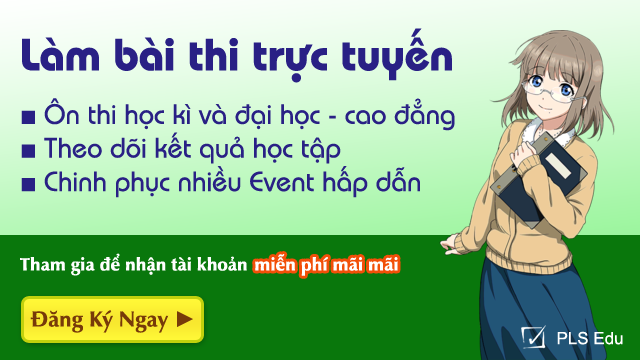
<style>
.page{position:relative;width:640px;height:360px;background:#09770c}
.page>*{position:absolute;margin:0}
.t1{font:28px "UVNBaiSau";color:#292085}
.t2{font:45px/0px "UVNBaiSauBold";color:#292085}
.t3{font:28px "TimesNewRomanPSMT";color:#292085}
.t4{font:18px "UVNNhanNang";color:#ffffff}
.t5{font:22px "UVNNhanBold";color:#773a09}
.t6{font:22px "Arial-BoldMT";color:#773a09}
.t7{font:17px "ArialMT";color:#ffffff}
</style>
<div class="page">
<p class="t1" style="left:21px;top:28px;width:434px;height:170px"><span class="t2">Làm bài thi trực tuyến<br></span><span class="t3">■ </span>Ôn thi học kì và đại học - cao đẳng<br><span class="t3">■ </span>Theo dõi kết quả học tập<br><span class="t3">■ </span>Chinh phục nhiều Event hấp dẫn</p>
<p class="t4" style="left:20px;top:253px;width:227px;height:23px">Tham gia để nhận tài khoản</p>
<p class="t4" style="left:255px;top:254px;width:143px;height:22px">miễn phí mãi mãi</p>
<p class="t5" style="left:30px;top:310px;width:163px;height:23px">Đăng Ký Ngay <span class="t6">►</span></p>
<p class="t7" style="left:557px;top:331px;width:66px;height:14px">PLS Edu</p>
</div>
